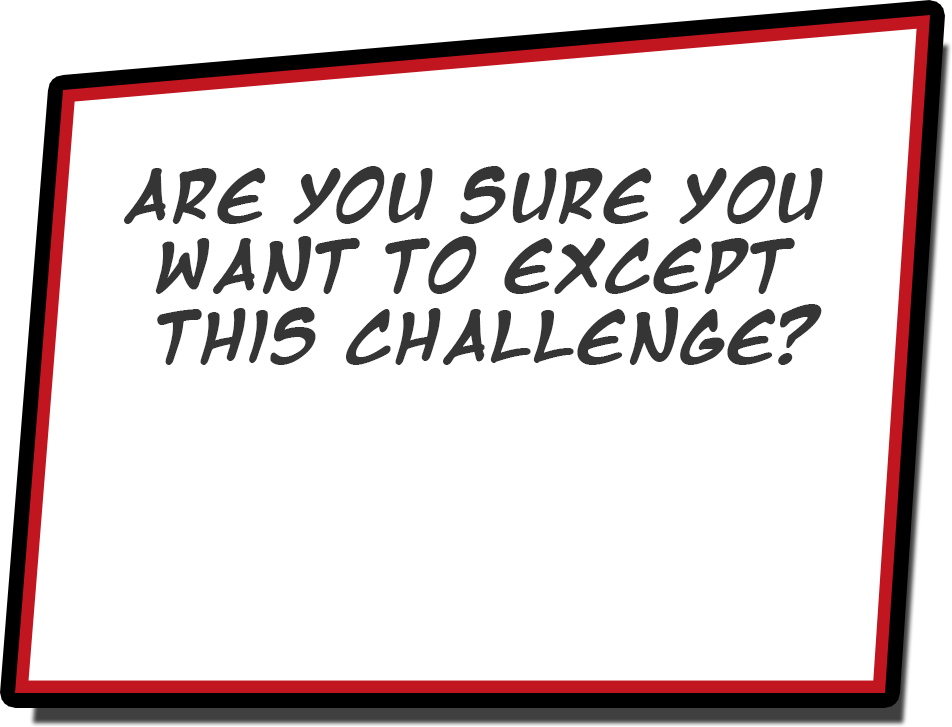
<style>
.page{position:relative;width:952px;height:727px;background:#ffffff}
.page>*{position:absolute;margin:0}
.t1{font:58.7px "MangaTempleBold";color:#353535}
</style>
<div class="page">
<p class="t1" style="left:124px;top:166px;width:699px;height:199px;text-align:center">Are You sure you <br>want to except <br>this challenge?</p>
</div>
